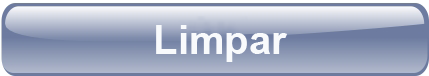
<style>
.page{position:relative;width:429px;height:76px}
.page>*{position:absolute;margin:0}
.t1{font:40px "Arial-BoldMT";color:#f8fafc}
</style>
<div class="page">
<p class="t1" style="left:156px;top:25px;width:131px;height:37px">Limpar</p>
</div>
